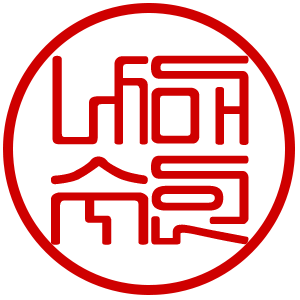
<style>
.page{position:relative;width:300px;height:300px;background:#ffffff}
.page>*{position:absolute;margin:0}
.t1{font:100px/100px "HJÇÑÀü¼­B";color:#cf0000}
</style>
<div class="page">
<p class="t1" style="left:51px;top:55px;width:198px;height:190px">나매<br>수인</p>
</div>
